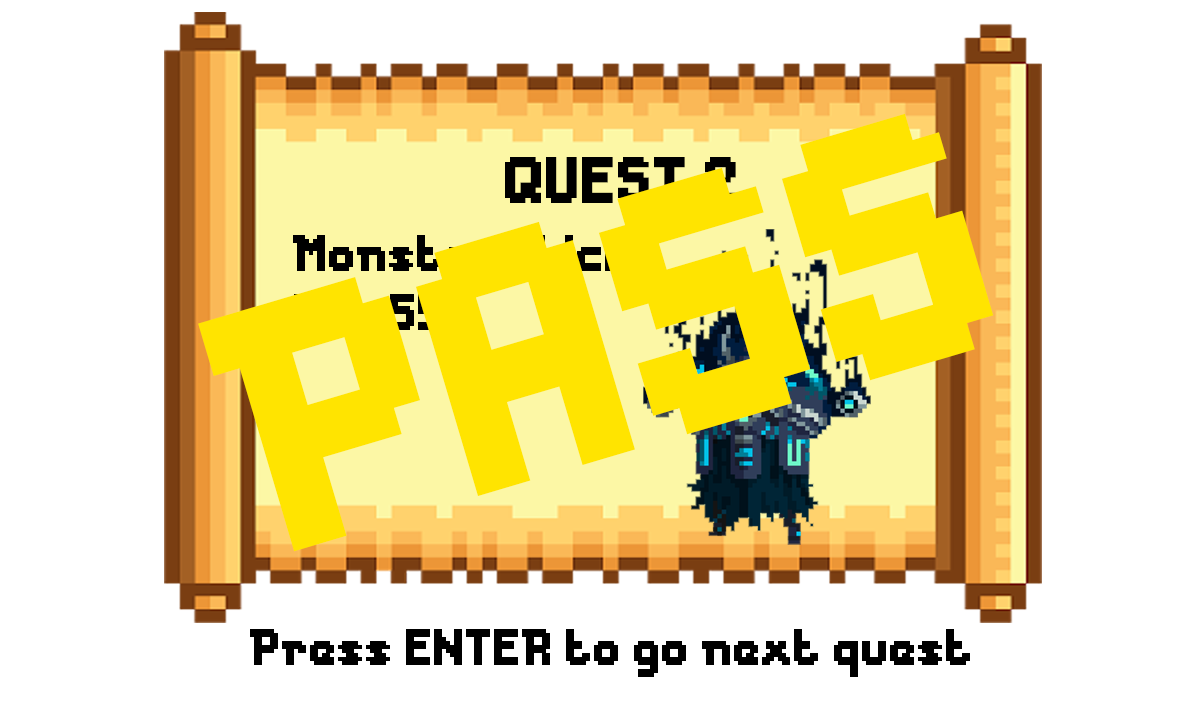
<style>
.page{position:relative;width:1200px;height:720px;background:#ffffff}
.page>*{position:absolute;margin:0}
.t1{font:327.3px "Messe-Duesseldorf";color:#ffe400}
.t2{font:61.3px "Messe-Duesseldorf";color:#000000}
.t3{font:48px "Messe-Duesseldorf"}
.t4{font:48px "Messe-Duesseldorf";color:#ffe400}
.t5{font:48px "Messe-Duesseldorf";color:#000000}
</style>
<div class="page">
<p class="t1" style="left:198px;top:113px;width:796px;height:439px;rotate:-17deg">PASS</p>
<p class="t2" style="left:505px;top:157px;width:231px;height:46px">QUEST 2</p>
<p class="t3" style="left:293px;top:235px;width:336px;height:36px">Monster : Lich</p>
<p class="t4" style="left:294px;top:294px;width:148px;height:36px">HP : 55</p>
<p class="t5" style="left:250px;top:629px;width:720px;height:48px">Press ENTER to go next quest</p>
</div>
